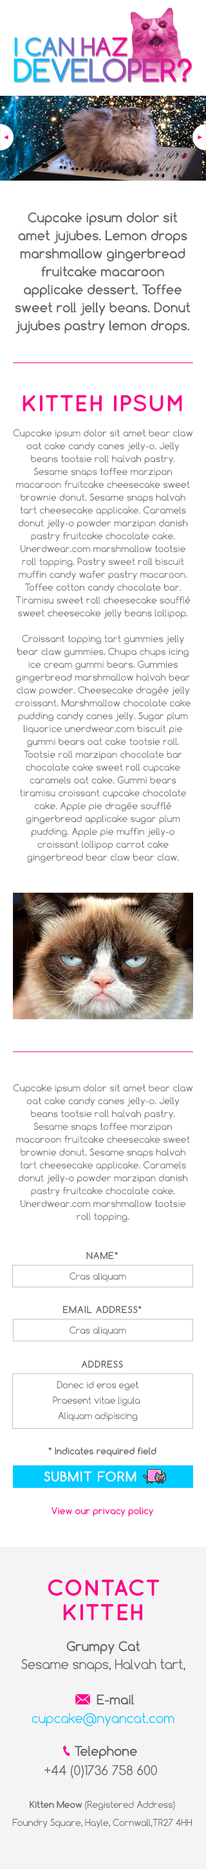
<style>
.page{position:relative;width:206px;height:1869px;background:#ffffff}
.page>*{position:absolute;margin:0}
.t1{font:12.9px/18px "Comfortaa-Bold";color:#5d6566}
.t2{font:23.1px "QuicksandBold-Regular";color:#fc058b;text-transform:uppercase}
.t3{font:9px/12.9px "Comfortaa";letter-spacing:0.01em;color:#5d6566}
.t4{font:9px "Comfortaa-Bold";letter-spacing:0.06em;color:#5d6566;text-transform:uppercase}
.t5{font:9px "Comfortaa";letter-spacing:-0.01em;color:#5d6566}
.t6{font:9px/2.6px "Comfortaa";letter-spacing:-0.01em;color:#5d6566}
.t7{font:9px "Comfortaa-Bold";color:#5d6566}
.t8{font:12.9px "Comfortaa-Bold";letter-spacing:0.06em;color:#ffffff;text-transform:uppercase}
.t9{font:9px "Comfortaa-Bold";color:#fc058b}
.t10{font:12.9px/18px "Comfortaa";letter-spacing:-0.01em;color:#5d6566}
.t11{font:23.1px/11.6px "QuicksandBold-Regular";color:#fc058b;text-transform:uppercase}
.t12{font:12.9px/18px "Comfortaa-Bold";letter-spacing:-0.01em;color:#5d6566}
.t13{font:12.9px "Comfortaa-Bold";letter-spacing:-0.01em;color:#5d6566}
.t14{font:12.9px "Comfortaa";letter-spacing:-0.01em;color:#00ccff}
.t15{font:12.9px "Comfortaa";letter-spacing:-0.01em;color:#5d6566}
.t16{font:9px/18px "Comfortaa";letter-spacing:-0.01em;color:#5d6566}
.t17{font:9px/18px "Comfortaa-Bold";letter-spacing:-0.01em;color:#5d6566}
</style>
<div class="page">
<p class="t1" style="left:15px;top:212px;width:175px;height:122px;text-align:center">Cupcake ipsum dolor sit amet jujubes. Lemon drops marshmallow gingerbread fruitcake macaroon applicake dessert. Toffee sweet roll jelly beans. Donut jujubes pastry lemon drops.</p>
<p class="t2" style="left:22px;top:395px;width:160px;height:16px">KittEH ipsum</p>
<p class="t3" style="left:13px;top:429px;width:180px;height:434px;text-align:center">Cupcake ipsum dolor sit amet bear claw oat cake candy canes jelly-o. Jelly beans tootsie roll halvah pastry. Sesame snaps toffee marzipan macaroon fruitcake cheesecake sweet brownie donut. Sesame snaps halvah tart cheesecake applicake. Caramels donut jelly-o powder marzipan danish pastry fruitcake chocolate cake. Unerdwear.com marshmallow tootsie roll topping. Pastry sweet roll biscuit muffin candy wafer pastry macaroon. Toffee cotton candy chocolate bar. Tiramisu sweet roll cheesecake soufflé sweet cheesecake jelly beans lollipop.<br>Croissant topping tart gummies jelly bear claw gummies. Chupa chups icing ice cream gummi bears. Gummies gingerbread marshmallow halvah bear claw powder. Cheesecake dragée jelly croissant. Marshmallow chocolate cake pudding candy canes jelly. Sugar plum liquorice unerdwear.com biscuit pie gummi bears oat cake tootsie roll. Tootsie roll marzipan chocolate bar chocolate cake sweet roll cupcake caramels oat cake. Gummi bears tiramisu croissant cupcake chocolate cake. Apple pie dragée soufflé gingerbread applicake sugar plum pudding. Apple pie muffin jelly-o croissant lollipop carrot cake gingerbread bear claw bear claw.</p>
<p class="t3" style="left:13px;top:1084px;width:180px;height:139px;text-align:center">Cupcake ipsum dolor sit amet bear claw oat cake candy canes jelly-o. Jelly beans tootsie roll halvah pastry. Sesame snaps toffee marzipan macaroon fruitcake cheesecake sweet brownie donut. Sesame snaps halvah tart cheesecake applicake. Caramels donut jelly-o powder marzipan danish pastry fruitcake chocolate cake. Unerdwear.com marshmallow tootsie roll topping.</p>
<p class="t4" style="left:86px;top:1252px;width:32px;height:7px">Name*</p>
<p class="t5" style="left:69px;top:1273px;width:57px;height:9px">Cras aliquam</p>
<p class="t4" style="left:63px;top:1306px;width:78px;height:7px">email address*</p>
<p class="t5" style="left:69px;top:1327px;width:57px;height:9px">Cras aliquam</p>
<p class="t4" style="left:81px;top:1361px;width:42px;height:7px">Address</p>
<p class="t6" style="left:53px;top:1382px;width:87px;height:40px;text-align:center">Donec id eros eget<br>Praesent vitae ligula <br>Aliquam adipiscing</p>
<p class="t7" style="left:48px;top:1448px;width:108px;height:9px">* Indicates required field</p>
<p class="t8" style="left:44px;top:1472px;width:92px;height:10px">Submit form</p>
<p class="t9" style="left:51px;top:1508px;width:102px;height:9px">View our privacy policy</p>
<p class="t10" style="left:21px;top:1580px;width:164px;height:93px;text-align:center"><span class="t11">Contact<br>kitteh<br></span><span class="t12">Grumpy Cat<br></span>Sesame snaps, Halvah tart, cheesecake, TR27 4HH</p>
<p class="t13" style="left:96px;top:1695px;width:38px;height:10px">E-mail</p>
<p class="t14" style="left:32px;top:1713px;width:142px;height:14px">cupcake@nyancat.com</p>
<p class="t13" style="left:74px;top:1746px;width:63px;height:14px">Telephone</p>
<p class="t15" style="left:44px;top:1765px;width:113px;height:14px">+44 (0)1736 758 600</p>
<p class="t16" style="left:12px;top:1801px;width:180px;height:28px;text-align:center"><span class="t17">Kitten Meow</span> (Registered Address) Foundry Square, Hayle, Cornwall,TR27 4HH</p>
</div>
